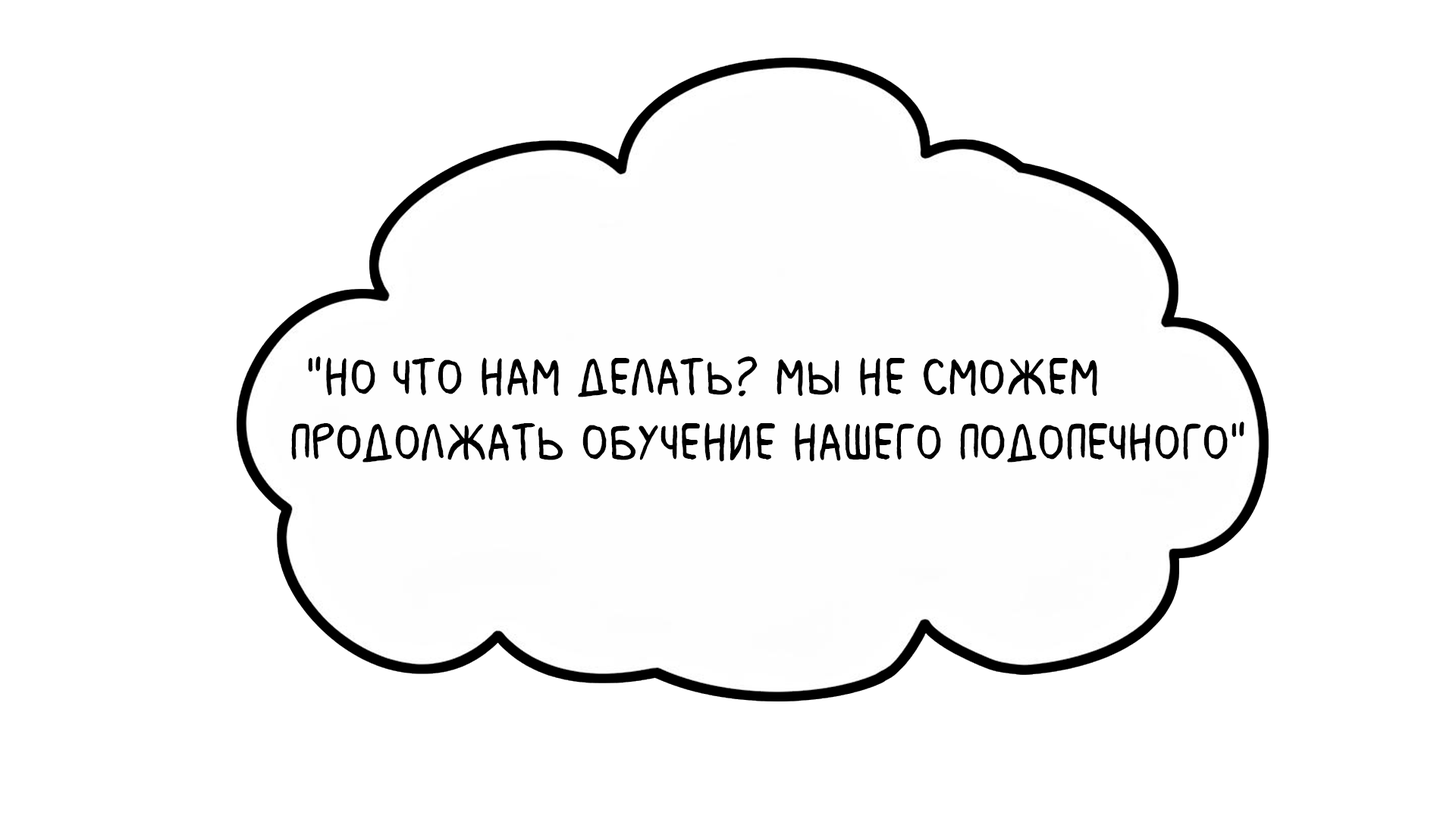
<style>
.page{position:relative;width:1456px;height:819px;background:#ffffff}
.page>*{position:absolute;margin:0}
.t1{font:54.6px "MilkMustacheBB";color:#000000}
</style>
<div class="page">
<p class="t1" style="left:291px;top:356px;width:953px;height:107px">"Но что нам делать? Мы не сможем <br>продолжать обучение нашего подопечного"</p>
</div>
